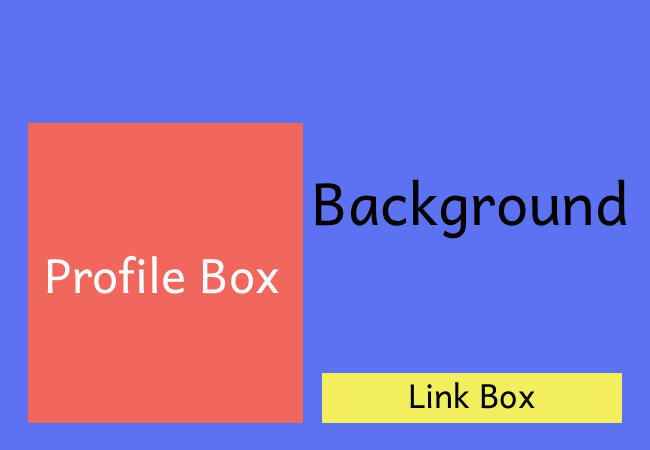
<style>
.page{position:relative;width:650px;height:450px;background:#5d72f1}
.page>*{position:absolute;margin:0}
.t1{font:58px "Andika";color:#000000}
.t2{font:47px "Andika";color:#ffffff}
.t3{font:33px "Andika";color:#000000}
</style>
<div class="page">
<p class="t1" style="left:315px;top:179px;width:312px;height:60px">Background</p>
<p class="t2" style="left:47px;top:255px;width:232px;height:39px">Profile Box</p>
<p class="t3" style="left:410px;top:382px;width:125px;height:27px">Link Box</p>
</div>
